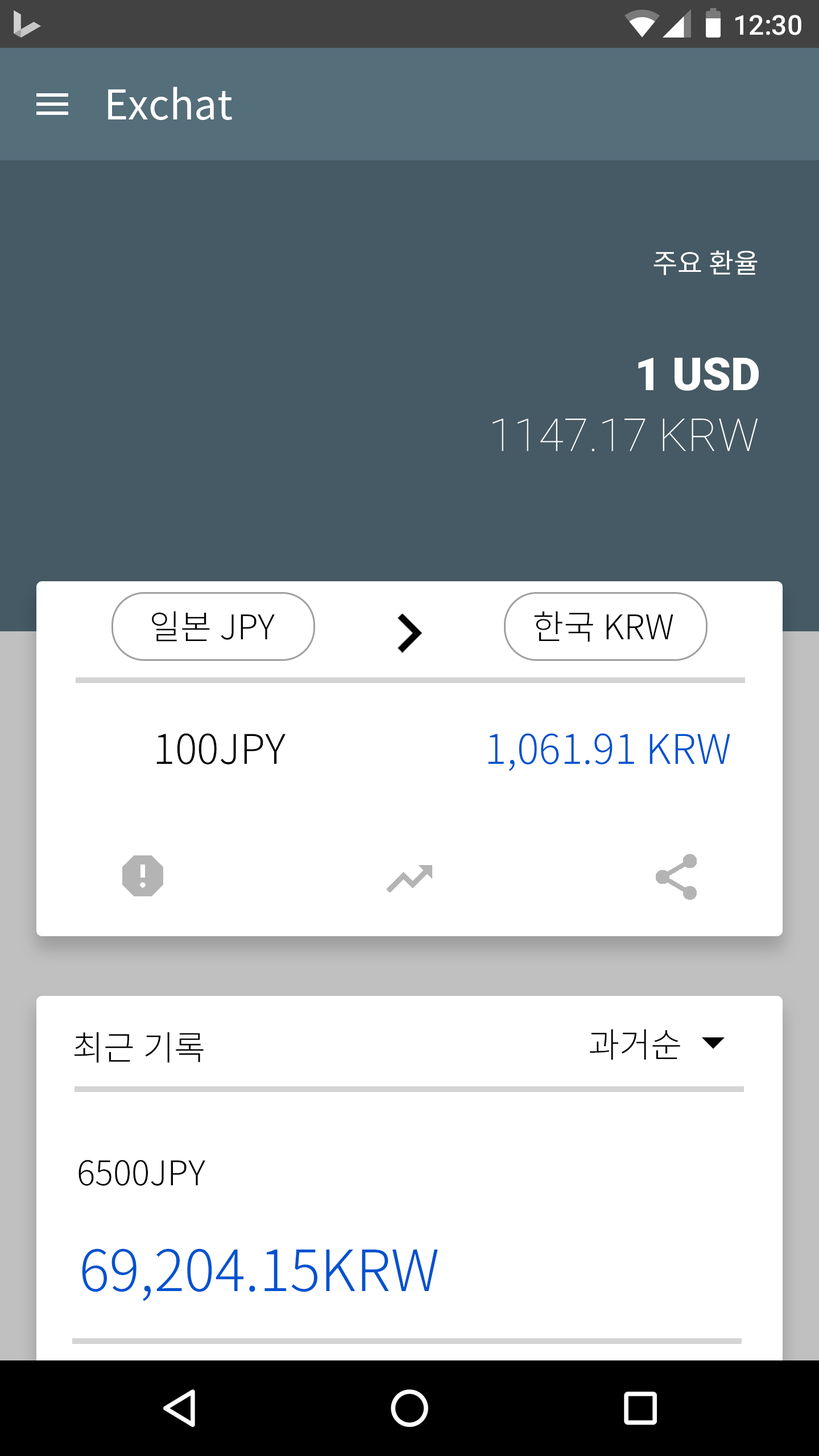
<style>
.page{position:relative;width:819px;height:1456px;background:#ffffff}
.page>*{position:absolute;margin:0}
.t1{font:27.3px "Roboto-Medium";color:#ffffff}
.t2{font:40.9px "NotoSansCJKkr-Regular";color:#ffffff}
.t3{font:27.3px "NotoSansCJKkr-Regular";color:#ffffff}
.t4{font:45.5px "Roboto-Black";color:#ffffff}
.t5{font:45.5px "Roboto-Thin";color:#ffffff}
.t6{font:34.1px "NotoSansCJKkr-Light";color:#000000}
.t7{font:40.9px "NotoSansCJKkr-Light";color:#000000}
.t8{font:40.9px "NotoSansCJKkr-Light";color:#0052ce}
.t9{font:56.9px "NotoSansCJKkr-Light";color:#0052ce}
</style>
<div class="page">
<p class="t1" style="left:735px;top:15px;width:66px;height:20px">12:30</p>
<p class="t2" style="left:108px;top:86px;width:124px;height:34px">Exchat</p>
<p class="t3" style="left:653px;top:250px;width:105px;height:25px">주요 환율</p>
<p class="t4" style="left:638px;top:357px;width:121px;height:34px">1 USD</p>
<p class="t5" style="left:493px;top:419px;width:265px;height:33px">1147.17 KRW</p>
<p class="t6" style="left:152px;top:611px;width:123px;height:31px">일본 JPY</p>
<p class="t6" style="left:534px;top:611px;width:139px;height:31px">한국 KRW</p>
<p class="t7" style="left:156px;top:733px;width:130px;height:31px">100JPY</p>
<p class="t8" style="left:488px;top:733px;width:242px;height:38px">1,061.91 KRW</p>
<p class="t6" style="left:74px;top:1032px;width:130px;height:31px">최근 기록</p>
<p class="t6" style="left:590px;top:1029px;width:90px;height:31px">과거순</p>
<p class="t6" style="left:78px;top:1160px;width:127px;height:26px">6500JPY</p>
<p class="t9" style="left:82px;top:1248px;width:356px;height:53px">69,204.15KRW</p>
</div>
